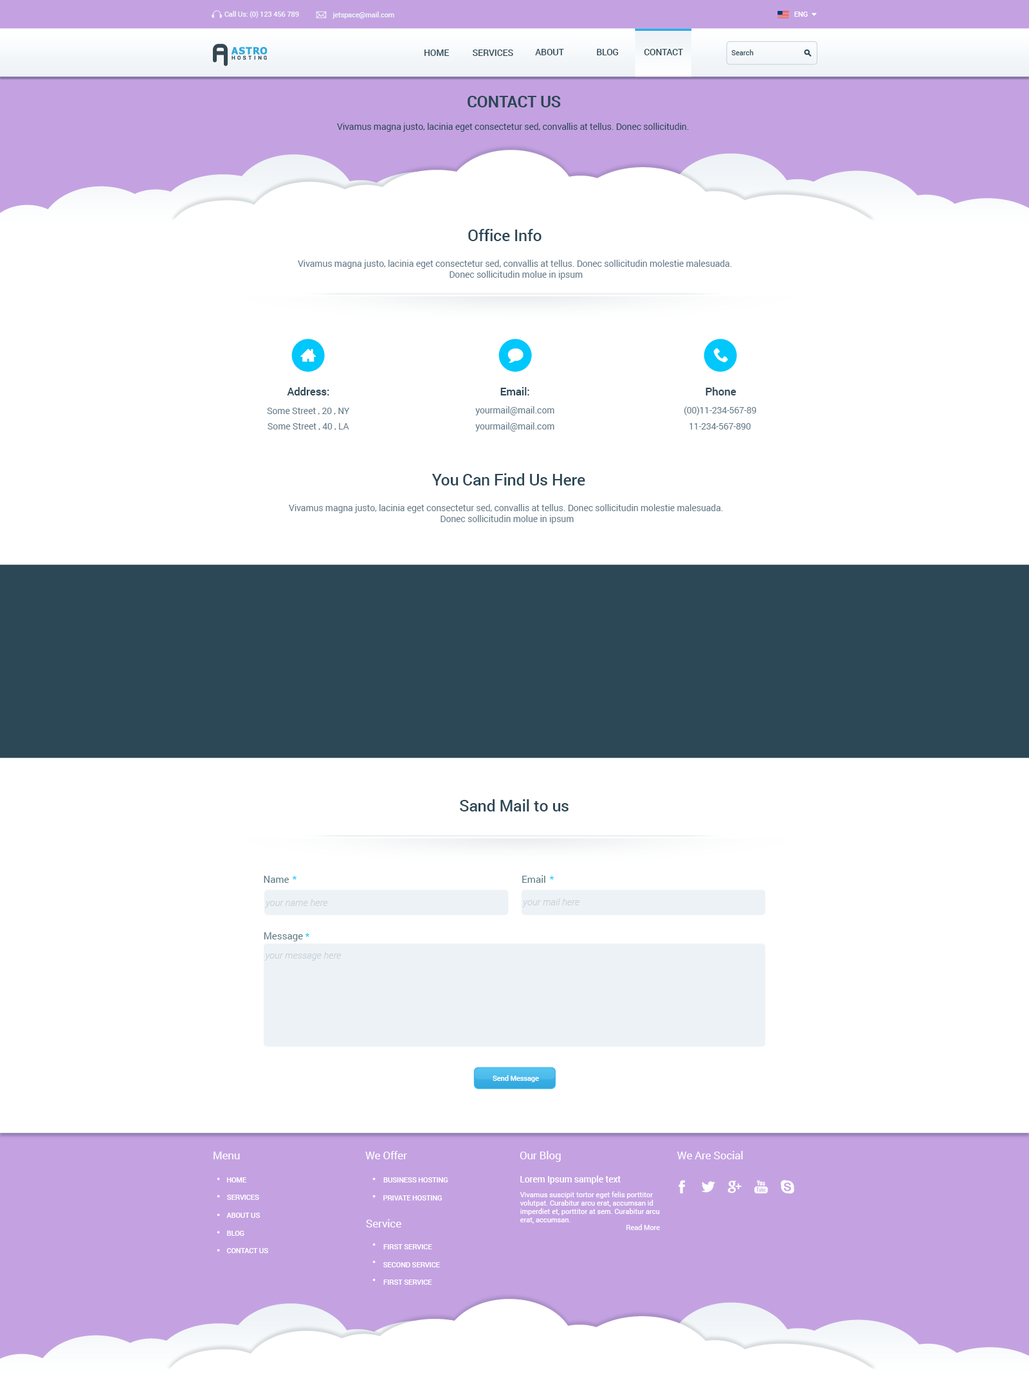
<style>
.page{position:relative;width:1029px;height:1376px;background:#ffffff}
.page>*{position:absolute;margin:0}
.t1{font:7.1px "Roboto-Medium";letter-spacing:-0.01em;color:#edf2f6}
.t2{font:7.1px "Roboto-Medium";letter-spacing:-0.01em;color:#ffffff}
.t3{font:9px "Roboto-Medium";letter-spacing:-0.01em;color:#2c4755}
.t4{font:7.1px "Roboto-Regular";color:#2c4755}
.t5{font:16.1px "Roboto-Bold";letter-spacing:-0.01em;color:#2c4755}
.t6{font:9px "Roboto-Regular";letter-spacing:-0.01em;color:#2c4755}
.t7{font:16.1px "Roboto-Medium";letter-spacing:-0.01em;color:#2c4755}
.t8{font:9px "Roboto-Regular";letter-spacing:-0.01em;color:#637988}
.t9{font:10.9px "Roboto-Medium";letter-spacing:-0.01em;color:#2c4755}
.t10{font:9.6px "Roboto-Regular";color:#597984}
.t11{font:9.6px "Roboto-Regular";color:#00c7fc}
.t12{font:9.6px "Roboto-LightItalic";color:#c3d0d8}
.t13{font:10.9px "Roboto-Regular";letter-spacing:-0.01em;color:#ffffff}
.t14{font:9px "Roboto-Medium";letter-spacing:-0.01em;color:#ffffff}
.t15{font:7.1px "Roboto-Regular";color:#ffffff}
.t16{font:7.1px "Roboto-Regular";letter-spacing:-0.01em;color:#ffffff}
</style>
<div class="page">
<p class="t1" style="left:224px;top:11px;width:75px;height:7px">Call Us: (0) 123 456 789</p>
<p class="t1" style="left:332px;top:12px;width:62px;height:7px">jetspace@mail.com</p>
<p class="t2" style="left:794px;top:12px;width:13px;height:5px">ENG</p>
<p class="t3" style="left:424px;top:50px;width:25px;height:6px">HOME</p>
<p class="t3" style="left:473px;top:50px;width:40px;height:6px">SERVICES</p>
<p class="t3" style="left:535px;top:49px;width:29px;height:6px">ABOUT</p>
<p class="t3" style="left:597px;top:49px;width:21px;height:6px">BLOG</p>
<p class="t3" style="left:644px;top:49px;width:39px;height:6px">CONTACT</p>
<p class="t4" style="left:731px;top:50px;width:22px;height:5px">Search</p>
<p class="t5" style="left:467px;top:96px;width:94px;height:11px">CONTACT US</p>
<p class="t6" style="left:337px;top:123px;width:351px;height:9px">Vivamus magna justo, lacinia eget consectetur sed, convallis at tellus. Donec sollicitudin.</p>
<p class="t7" style="left:468px;top:229px;width:73px;height:12px">Office Info</p>
<p class="t8" style="left:298px;top:260px;width:434px;height:20px;text-align:center">Vivamus magna justo, lacinia eget consectetur sed, convallis at tellus. Donec sollicitudin molestie malesuada. <br>Donec sollicitudin molue in ipsum</p>
<p class="t9" style="left:287px;top:387px;width:42px;height:8px">Address:</p>
<p class="t9" style="left:500px;top:387px;width:29px;height:8px">Email:</p>
<p class="t9" style="left:705px;top:387px;width:31px;height:8px">Phone</p>
<p class="t8" style="left:267px;top:408px;width:83px;height:7px">Some Street , 20 , NY</p>
<p class="t8" style="left:475px;top:406px;width:79px;height:9px">yourmail@mail.com</p>
<p class="t8" style="left:684px;top:406px;width:72px;height:9px">(00)11-234-567-89</p>
<p class="t8" style="left:267px;top:423px;width:82px;height:7px">Some Street , 40 , LA</p>
<p class="t8" style="left:475px;top:422px;width:79px;height:9px">yourmail@mail.com</p>
<p class="t8" style="left:689px;top:423px;width:61px;height:6px">11-234-567-890</p>
<p class="t7" style="left:431px;top:473px;width:154px;height:12px">You Can Find Us Here</p>
<p class="t8" style="left:289px;top:504px;width:434px;height:20px;text-align:center">Vivamus magna justo, lacinia eget consectetur sed, convallis at tellus. Donec sollicitudin molestie malesuada. <br>Donec sollicitudin molue in ipsum</p>
<p class="t7" style="left:460px;top:799px;width:108px;height:12px">Sand Mail to us</p>
<p class="t10" style="left:264px;top:876px;width:25px;height:7px">Name</p>
<p class="t11" style="left:292px;top:876px;width:4px;height:3px">*</p>
<p class="t10" style="left:522px;top:875px;width:23px;height:8px">Email</p>
<p class="t11" style="left:550px;top:876px;width:4px;height:3px">*</p>
<p class="t12" style="left:265px;top:899px;width:63px;height:9px">your name here</p>
<p class="t12" style="left:522px;top:898px;width:57px;height:9px">your mail here</p>
<p class="t10" style="left:264px;top:932px;width:39px;height:9px">Message</p>
<p class="t11" style="left:305px;top:933px;width:4px;height:4px">*</p>
<p class="t12" style="left:264px;top:951px;width:77px;height:9px">your message here</p>
<p class="t2" style="left:492px;top:1075px;width:47px;height:7px">Send Message</p>
<p class="t13" style="left:213px;top:1151px;width:27px;height:8px">Menu</p>
<p class="t13" style="left:365px;top:1151px;width:42px;height:8px">We Offer</p>
<p class="t13" style="left:519px;top:1151px;width:42px;height:11px">Our Blog</p>
<p class="t13" style="left:677px;top:1151px;width:65px;height:8px">We Are Social</p>
<p class="t2" style="left:227px;top:1177px;width:19px;height:5px">HOME</p>
<p class="t2" style="left:383px;top:1177px;width:65px;height:5px">BUSINESS HOSTING</p>
<p class="t14" style="left:520px;top:1175px;width:100px;height:9px">Lorem Ipsum sample text</p>
<p class="t15" style="left:519px;top:1191px;width:141px;height:32px">Vivamus suscipit tortor eget felis porttitor <br>volutpat. Curabitur arcu erat, accumsan id <br>imperdiet et, porttitor at sem. Curabitur arcu <br>erat, accumsan.</p>
<p class="t2" style="left:227px;top:1194px;width:32px;height:6px">SERVICES</p>
<p class="t2" style="left:383px;top:1195px;width:59px;height:5px">PRIVATE HOSTING</p>
<p class="t2" style="left:226px;top:1212px;width:34px;height:6px">ABOUT US</p>
<p class="t13" style="left:366px;top:1219px;width:35px;height:8px">Service</p>
<p class="t16" style="left:626px;top:1224px;width:34px;height:6px">Read More</p>
<p class="t2" style="left:227px;top:1230px;width:17px;height:6px">BLOG</p>
<p class="t2" style="left:226px;top:1248px;width:42px;height:5px">CONTACT US</p>
<p class="t2" style="left:383px;top:1244px;width:49px;height:5px">FIRST SERVICE</p>
<p class="t2" style="left:383px;top:1262px;width:57px;height:5px">SECOND SERVICE</p>
<p class="t2" style="left:383px;top:1279px;width:49px;height:5px">FIRST SERVICE</p>
</div>
